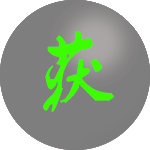
<style>
.page{position:relative;width:150px;height:150px;background:#7f7e7e}
.page>*{position:absolute;margin:0}
.t1{font:80px "2.0-";color:#3cfe00}
</style>
<div class="page">
<p class="t1" style="left:43px;top:31px;width:71px;height:81px">获</p>
</div>
